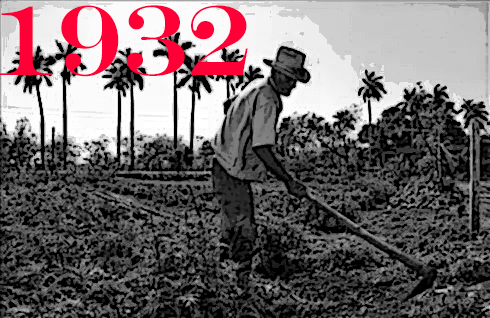
<style>
.page{position:relative;width:490px;height:318px}
.page>*{position:absolute;margin:0}
.t1{font:100px "EngraversMT";color:#ff0036}
</style>
<div class="page">
<p class="t1" style="left:0px;top:5px;width:248px;height:72px">1932</p>
</div>
